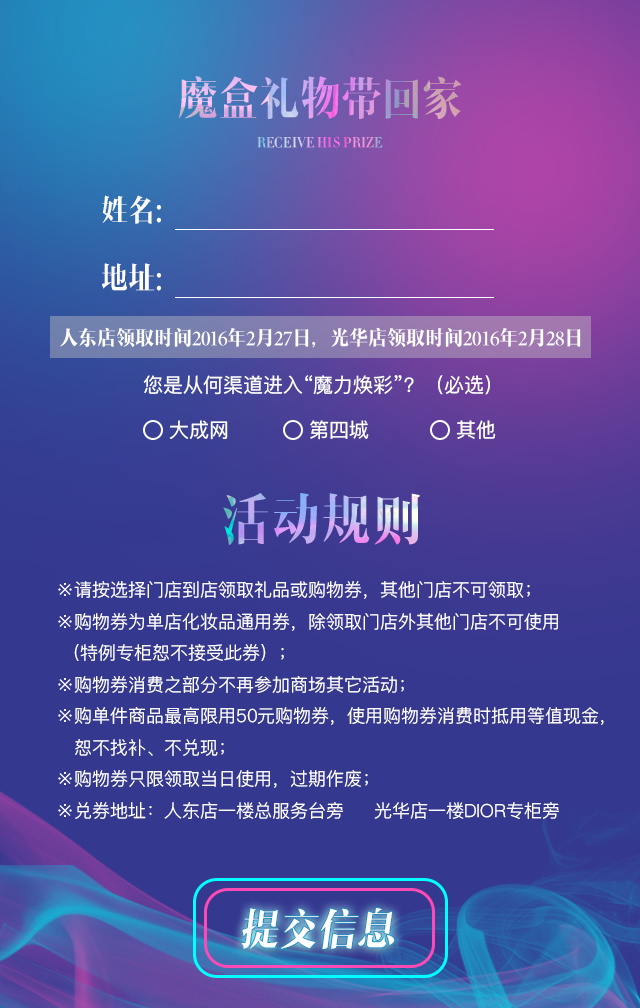
<style>
.page{position:relative;width:640px;height:1008px}
.page>*{position:absolute;margin:0}
.t1{font:45.4px "MFShangYa_Noncommercial-Regular";scale:0.9 1}
.t2{font:14px "MFShangYa_Noncommercial-Regular";text-transform:uppercase;scale:0.9 1}
.t3{font:30px "MFShangYa_Noncommercial-Regular";color:#ffffff;scale:0.9 1}
.t4{font:20px "MFShangYa_Noncommercial-Regular";color:#fffefe;scale:0.95 1}
.t5{font:20px "PingFangSC-Regular";color:#ffffff}
.t6{font:55.4px "MFShangYa_Noncommercial-Regular";scale:0.9 1}
.t7{font:18px "PingFangSC-Light";color:#fffefe}
.t8{font:43.7px "MFShangYa_Noncommercial-Regular";color:#ffffff;scale:0.89 1}
</style>
<div class="page">
<p class="t1" style="left:178px;top:76px;width:284px;height:43px">魔盒礼物带回家</p>
<p class="t2" style="left:257px;top:136px;width:126px;height:12px">receive his prize</p>
<p class="t3" style="left:102px;top:195px;width:59px;height:29px">姓名：</p>
<p class="t3" style="left:102px;top:263px;width:59px;height:28px">地址：</p>
<p class="t4" style="left:60px;top:327px;width:521px;height:21px">人东店领取时间2016年2月27日，光华店领取时间2016年2月28日</p>
<p class="t5" style="left:143px;top:375px;width:347px;height:20px">您是从何渠道进入“魔力焕彩”？（必选）</p>
<p class="t5" style="left:169px;top:420px;width:59px;height:20px">大成网</p>
<p class="t5" style="left:310px;top:420px;width:59px;height:20px">第四城</p>
<p class="t5" style="left:456px;top:420px;width:40px;height:20px">其他</p>
<p class="t6" style="left:223px;top:493px;width:197px;height:52px">活动规则</p>
<p class="t7" style="left:58px;top:581px;width:546px;height:238px">※请按选择门店到店领取礼品或购物券，其他门店不可领取；<br>※购物券为单店化妆品通用券，除领取门店外其他门店不可使用<br> （特例专柜恕不接受此券）；<br>※购物券消费之部分不再参加商场其它活动；<br>※购单件商品最高限用50元购物券，使用购物券消费时抵用等值现金，<br>   恕不找补、不兑现；<br>※购物券只限领取当日使用，过期作废；<br>※兑券地址：人东店一楼总服务台旁     光华店一楼DIOR专柜旁</p>
<p class="t8" style="left:241px;top:908px;width:153px;height:41px">提交信息</p>
</div>
